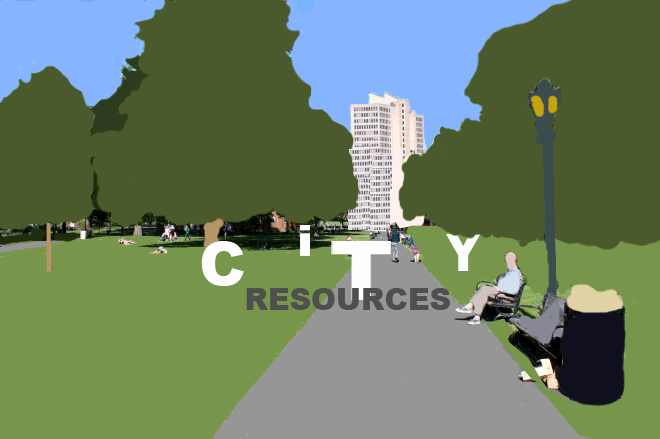
<style>
.page{position:relative;width:660px;height:439px;background:#4b5a2d}
.page>*{position:absolute;margin:0}
.t1{font:60px "Arial-Black";color:#fefefe}
.t2{font:30px "Arial-Black";color:#4f4f4f}
</style>
<div class="page">
<p class="t1" style="left:201px;top:241px;width:43px;height:45px">C</p>
<p class="t2" style="left:246px;top:288px;width:204px;height:22px">RESOURCES</p>
</div>
